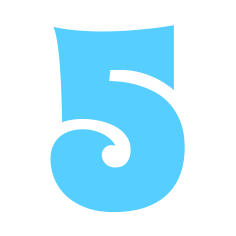
<style>
.page{position:relative;width:236px;height:236px;background:#ffffff}
.page>*{position:absolute;margin:0}
.t1{font:250px "SpicyRice-Regular";color:#56ceff}
</style>
<div class="page">
<p class="t1" style="left:50px;top:25px;width:135px;height:188px">5</p>
</div>
